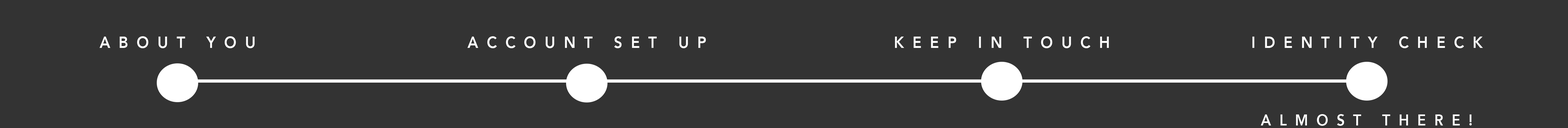
<style>
.page{position:relative;width:1568px;height:128px;background:#333333}
.page>*{position:absolute;margin:0}
.t1{font:16.2px "Avenir-Heavy";letter-spacing:0.58em;color:#ffffff;text-transform:uppercase;scale:0.91 1}
.t2{font:15.7px "Avenir-Heavy";letter-spacing:0.58em;color:#ffffff;text-transform:uppercase;scale:0.91 1}
</style>
<div class="page">
<p class="t1" style="left:100px;top:36px;width:155px;height:12px">About you</p>
<p class="t1" style="left:467px;top:36px;width:239px;height:12px">Account set up</p>
<p class="t1" style="left:895px;top:36px;width:214px;height:12px">keep in touch</p>
<p class="t1" style="left:1252px;top:36px;width:231px;height:12px">identity check</p>
<p class="t2" style="left:1261px;top:114px;width:211px;height:12px">Almost there!</p>
</div>
